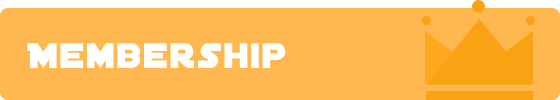
<style>
.page{position:relative;width:560px;height:100px;background:#ffb84f}
.page>*{position:absolute;margin:0}
.t1{font:38px "DistantGalaxy";letter-spacing:0.05em;color:#ffffff}
</style>
<div class="page">
<p class="t1" style="left:27px;top:43px;width:259px;height:25px">Membership</p>
</div>
